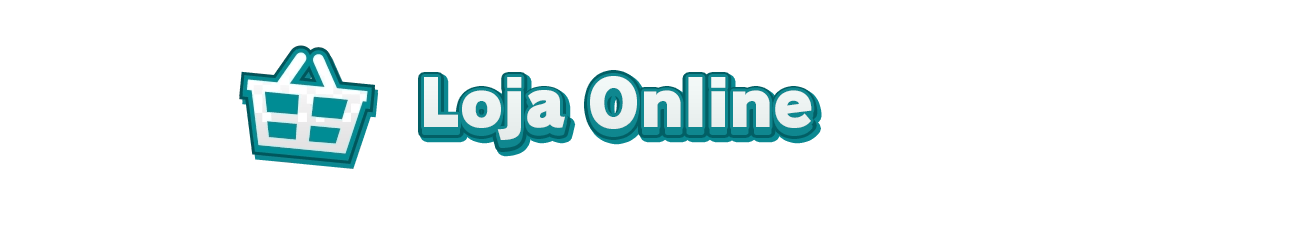
<style>
.page{position:relative;width:1314px;height:232px;background:#ffffff}
.page>*{position:absolute;margin:0}
.t1{font:69.5px "RodinPro-UB";color:#ebf1f0;scale:0.92 1}
.t2{font:64px "RodinPro-UB";color:#ecf2f1}
</style>
<div class="page">
<p class="t1" style="left:424px;top:76px;width:388px;height:70px">Loja Online</p>
<p class="t2" style="left:424px;top:76px;width:388px;height:64px">Loja Online</p>
</div>
